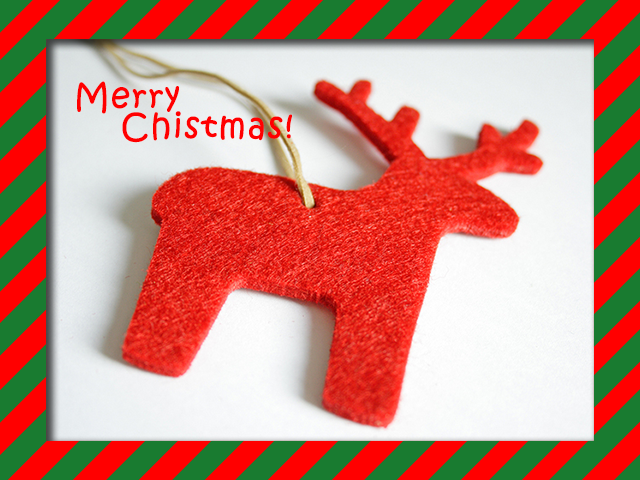
<style>
.page{position:relative;width:640px;height:480px}
.page>*{position:absolute;margin:0}
.t1{font:33.3px/29.2px "KristenITC-Regular";letter-spacing:0.025em;color:#ff0000;font-weight:bold}
</style>
<div class="page">
<p class="t1" style="left:77px;top:81px;width:215px;height:62px">Merry<br>    Chistmas!</p>
</div>
